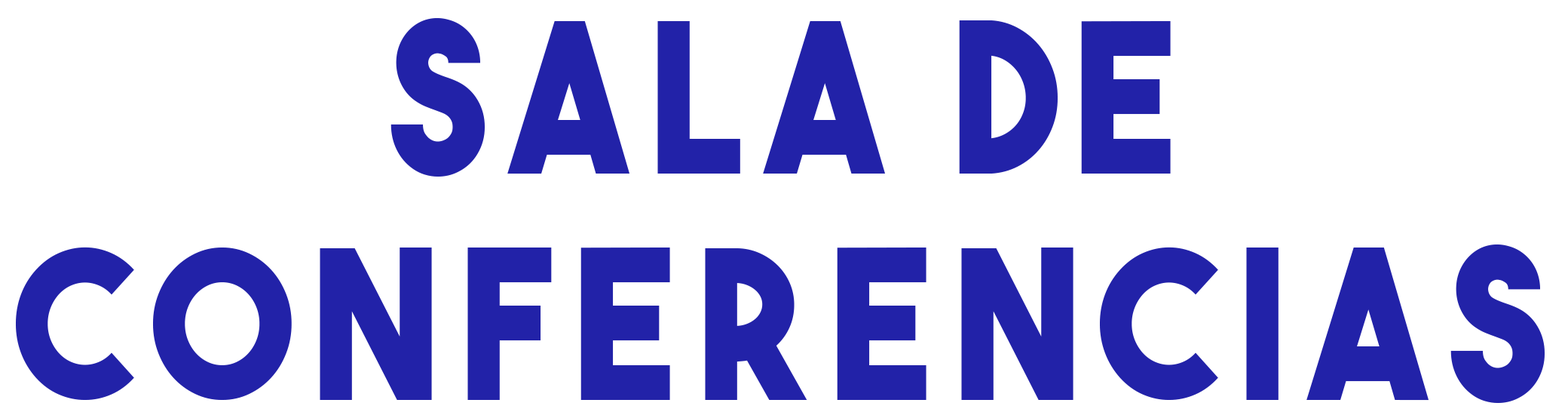
<style>
.page{position:relative;width:1568px;height:409px;background:#ffffff}
.page>*{position:absolute;margin:0}
.t1{font:207.3px "TheBoldFont";letter-spacing:0.1em;color:#2222a8;text-transform:uppercase;scale:0.91 1}
</style>
<div class="page">
<p class="t1" style="left:16px;top:17px;width:1529px;height:386px;text-align:center">sala de<br>conferencias</p>
</div>
